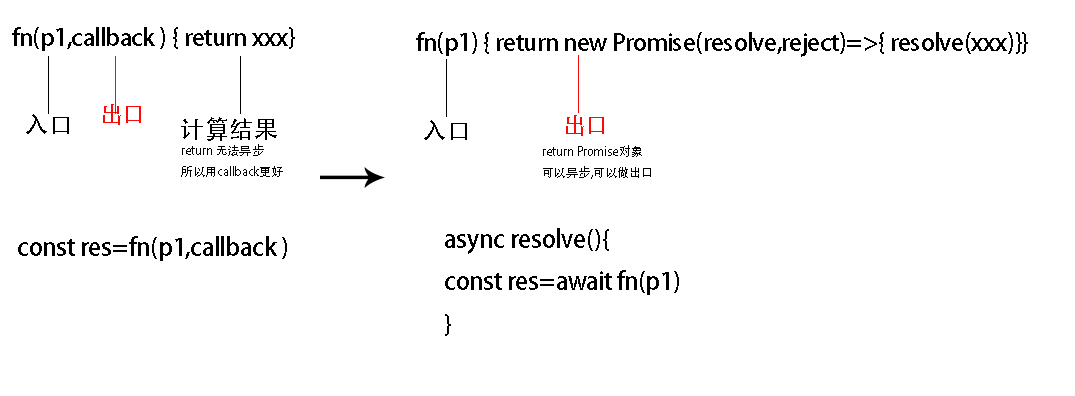
<style>
.page{position:relative;width:1075px;height:396px;background:#ffffff}
.page>*{position:absolute;margin:0}
.t1{font:23.6px "AdobeHeitiStd-Regular";color:#000000}
.t2{font:23.1px "AdobeHeitiStd-Regular";color:#fb0909}
.t3{font:24.1px "AdobeHeitiStd-Regular";color:#000000}
.t4{font:12px "AdobeHeitiStd-Regular";color:#000000}
.t5{font:24.3px "AdobeHeitiStd-Regular";color:#000000}
</style>
<div class="page">
<p class="t1" style="left:12px;top:27px;width:283px;height:24px">fn(p1,callback ) { return xxx}</p>
<p class="t1" style="left:416px;top:32px;width:612px;height:25px">fn(p1) { return new Promise(resolve,reject)=&gt;{ resolve(xxx)}}</p>
<p class="t2" style="left:103px;top:104px;width:38px;height:21px">出口</p>
<p class="t3" style="left:26px;top:114px;width:43px;height:20px">入口</p>
<p class="t3" style="left:181px;top:117px;width:96px;height:24px">计算结果</p>
<p class="t3" style="left:424px;top:120px;width:43px;height:20px">入口</p>
<p class="t2" style="left:566px;top:115px;width:38px;height:21px">出口</p>
<p class="t4" style="left:181px;top:144px;width:102px;height:33px">return 无法异步<br>所以用callback更好</p>
<p class="t4" style="left:543px;top:145px;width:108px;height:34px">return Promise对象<br>可以异步,可以做出口</p>
<p class="t5" style="left:445px;top:228px;width:234px;height:108px">async resolve(){<br>const res=await fn(p1)<br>}</p>
<p class="t5" style="left:18px;top:236px;width:269px;height:25px">const res=fn(p1,callback )</p>
</div>
